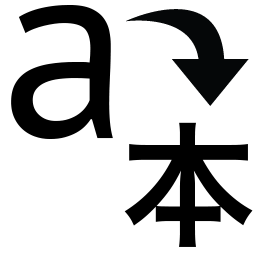
<style>
.page{position:relative;width:256px;height:256px;background:#ffffff}
.page>*{position:absolute;margin:0}
.t1{font:260px "PTSans-Regular";color:#000000}
.t2{font:135px "HiraginoSansGB-W6";color:#000000}
</style>
<div class="page">
<p class="t1" style="left:11px;top:5px;width:102px;height:134px">a</p>
<p class="t2" style="left:124px;top:122px;width:129px;height:125px">本</p>
</div>
